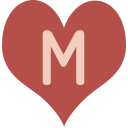
<style>
.page{position:relative;width:128px;height:128px;background:#b44f49}
.page>*{position:absolute;margin:0}
.t1{font:75px "Dosis-SemiBold";color:#f3cdc0}
</style>
<div class="page">
<p class="t1" style="left:42px;top:30px;width:43px;height:55px">M</p>
</div>
